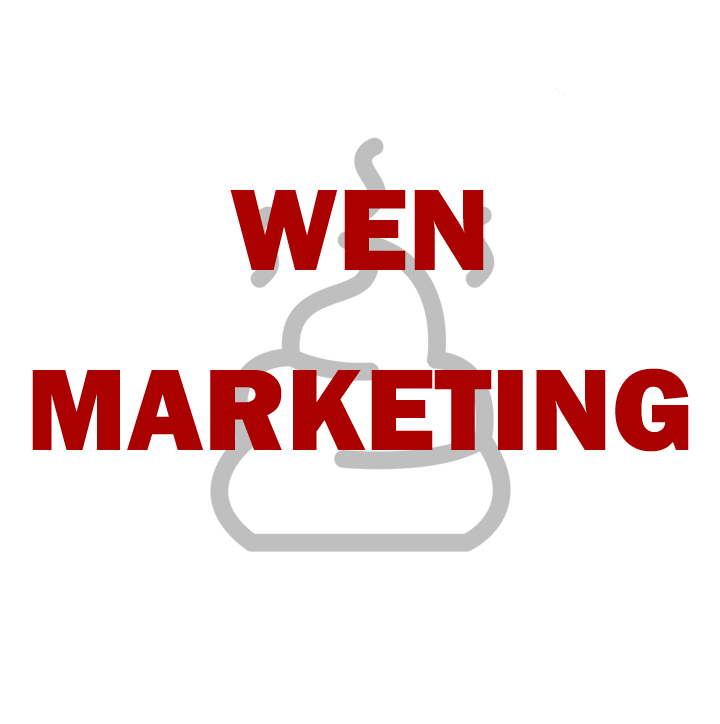
<style>
.page{position:relative;width:720px;height:724px;background:#ffffff}
.page>*{position:absolute;margin:0}
.t1{font:120px/180px "FranklinGothic-Heavy";color:#ab0000}
</style>
<div class="page">
<p class="t1" style="left:32px;top:190px;width:657px;height:262px;text-align:center">WEN<br>MARKETING</p>
</div>
